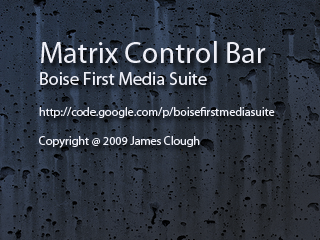
<style>
.page{position:relative;width:320px;height:240px}
.page>*{position:absolute;margin:0}
.t1{font:12px "MyriadPro-Regular";color:#eeeff7}
.t2{font:30px "MyriadPro-Regular";color:#eeeff7}
.t3{font:18px "MyriadPro-Regular";color:#eeeff7}
</style>
<div class="page">
<p class="t1" style="left:39px;top:41px;width:236px;height:107px"><span class="t2">Matrix Control Bar<br></span><span class="t3">Boise First Media Suite<br><br></span>http://code.google.com/p/boisefirstmediasuite<br><br>Copyright @ 2009 James Clough</p>
</div>
